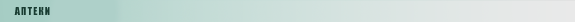
<style>
.page{position:relative;width:575px;height:22px}
.page>*{position:absolute;margin:0}
.t1{font:10px "Impact";letter-spacing:0.1em;color:#183b31}
</style>
<div class="page">
<p class="t1" style="left:14px;top:7px;width:36px;height:8px">АПТЕКИ</p>
</div>
